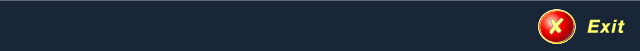
<style>
.page{position:relative;width:640px;height:51px;background:#192637}
.page>*{position:absolute;margin:0}
.t1{font:18px "HelveticaNeue-BoldItalic";letter-spacing:0.075em;color:#fdff6f}
</style>
<div class="page">
<p class="t1" style="left:587px;top:19px;width:38px;height:14px">Exit</p>
</div>
